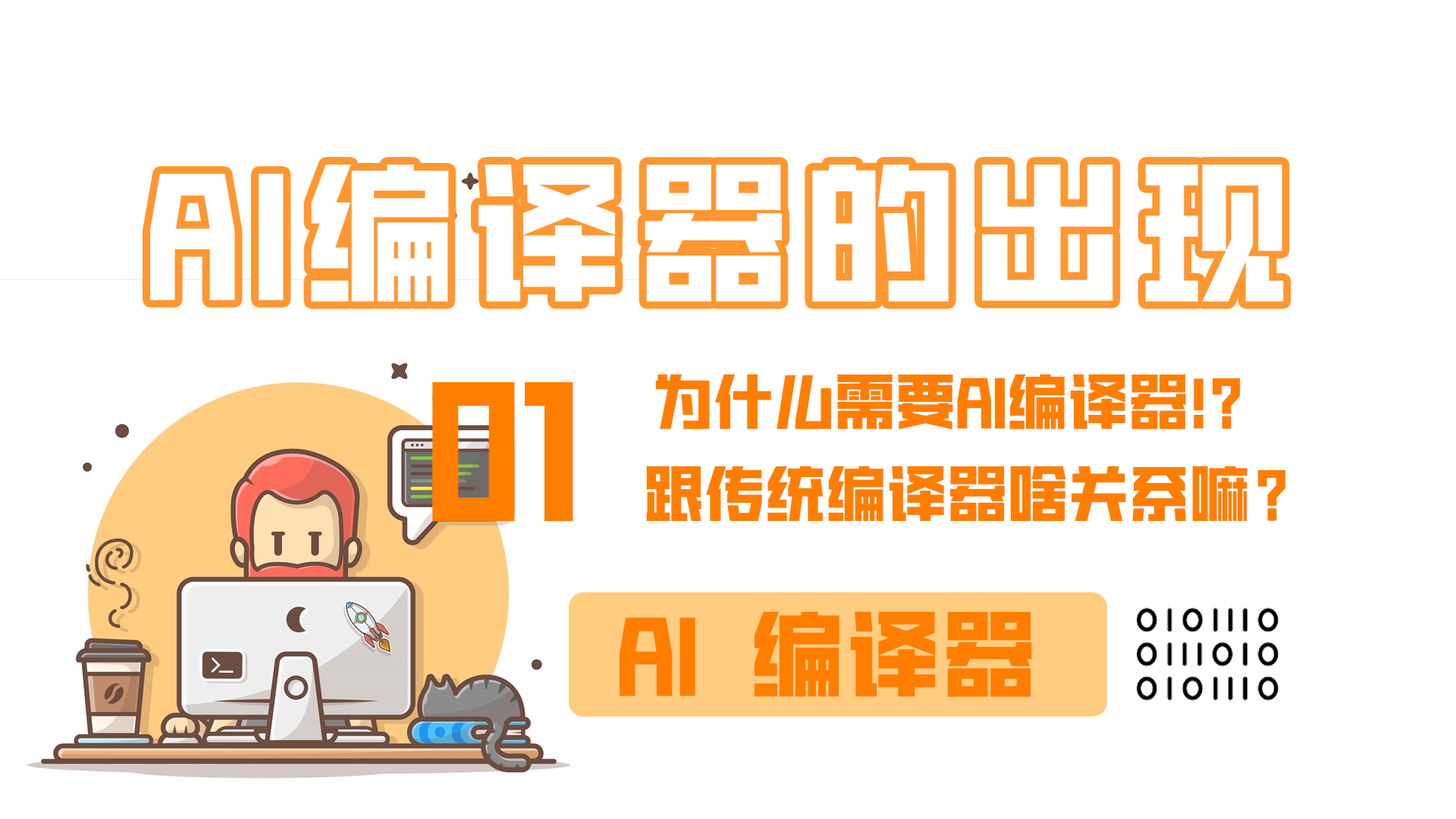
<style>
.page{position:relative;width:1456px;height:819px;background:#ffffff}
.page>*{position:absolute;margin:0}
.t1{font:151.7px "HGGTZHVF-Medium";letter-spacing:0.1em;color:#ffffff}
.t2{font:60.7px "HGGTZHVF-Medium";color:#ff7e00;font-weight:bold}
.t3{font:166.8px "HGGTZHVF-Medium";letter-spacing:-0.01em;color:#ff7e00}
.t4{font:93.8px "HGGTZHVF-Medium";letter-spacing:0.025em;color:#ff7e00;font-weight:bold}
</style>
<div class="page">
<p class="t1" style="left:150px;top:165px;width:1134px;height:137px">AI编译器的出现</p>
<p class="t2" style="left:655px;top:374px;width:585px;height:56px">为什么需要AI编译器！?</p>
<p class="t3" style="left:432px;top:382px;width:141px;height:140px">01</p>
<p class="t2" style="left:646px;top:466px;width:639px;height:55px">跟传统编译器啥关系嘛？</p>
<p class="t4" style="left:620px;top:611px;width:412px;height:86px">AI 编译器</p>
</div>
